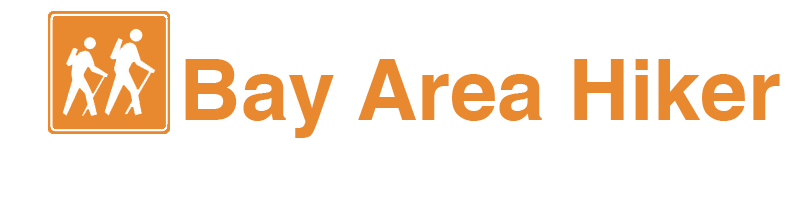
<style>
.page{position:relative;width:800px;height:200px;background:#ffffff}
.page>*{position:absolute;margin:0}
.t1{font:85px "Helvetica-Bold";color:#e8882f}
</style>
<div class="page">
<p class="t1" style="left:185px;top:59px;width:595px;height:79px">Bay Area Hiker</p>
</div>
